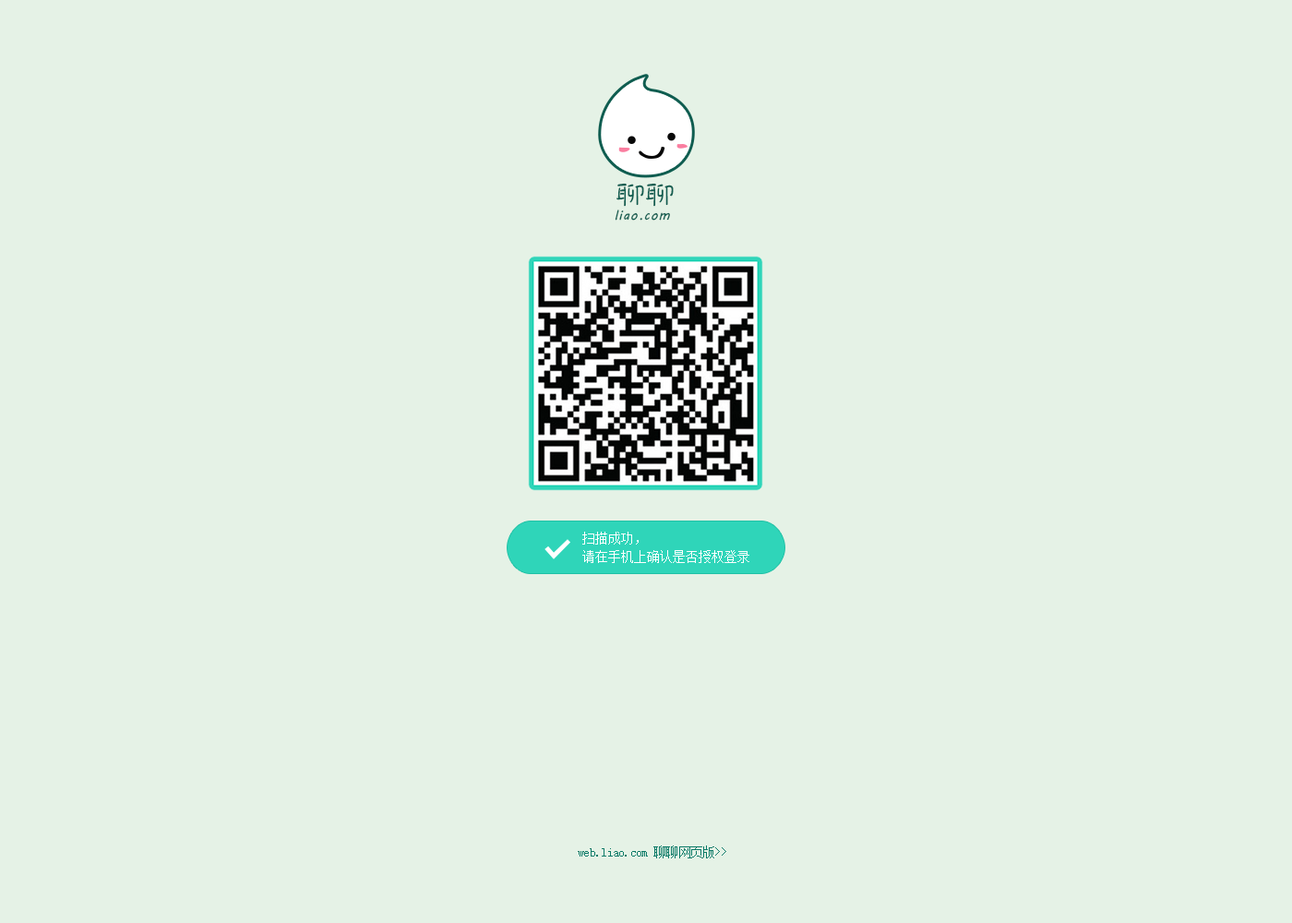
<style>
.page{position:relative;width:1292px;height:923px;background:#e5f2e6}
.page>*{position:absolute;margin:0}
.t1{font:36.4px "DFPao-W4-WIN-BF";letter-spacing:-0.05em;color:#0f5d50;scale:0.85 1}
.t2{font:13.4px "MVBoli";letter-spacing:0.075em;color:#0f5d50}
.t3{font:12.9px/18.5px "SimSun";color:#ffffff}
.t4{font:12.9px "SimSun";letter-spacing:-0.05em;color:#0b7a67}
</style>
<div class="page">
<p class="t1" style="left:616px;top:183px;width:58px;height:24px">聊聊</p>
<p class="t2" style="left:615px;top:209px;width:55px;height:12px">liao.com</p>
<p class="t3" style="left:582px;top:532px;width:167px;height:31px">扫描成功，<br>请在手机上确认是否授权登录</p>
<p class="t4" style="left:578px;top:845px;width:148px;height:13px">web.liao.com 聊聊网页版&gt;&gt;</p>
</div>
